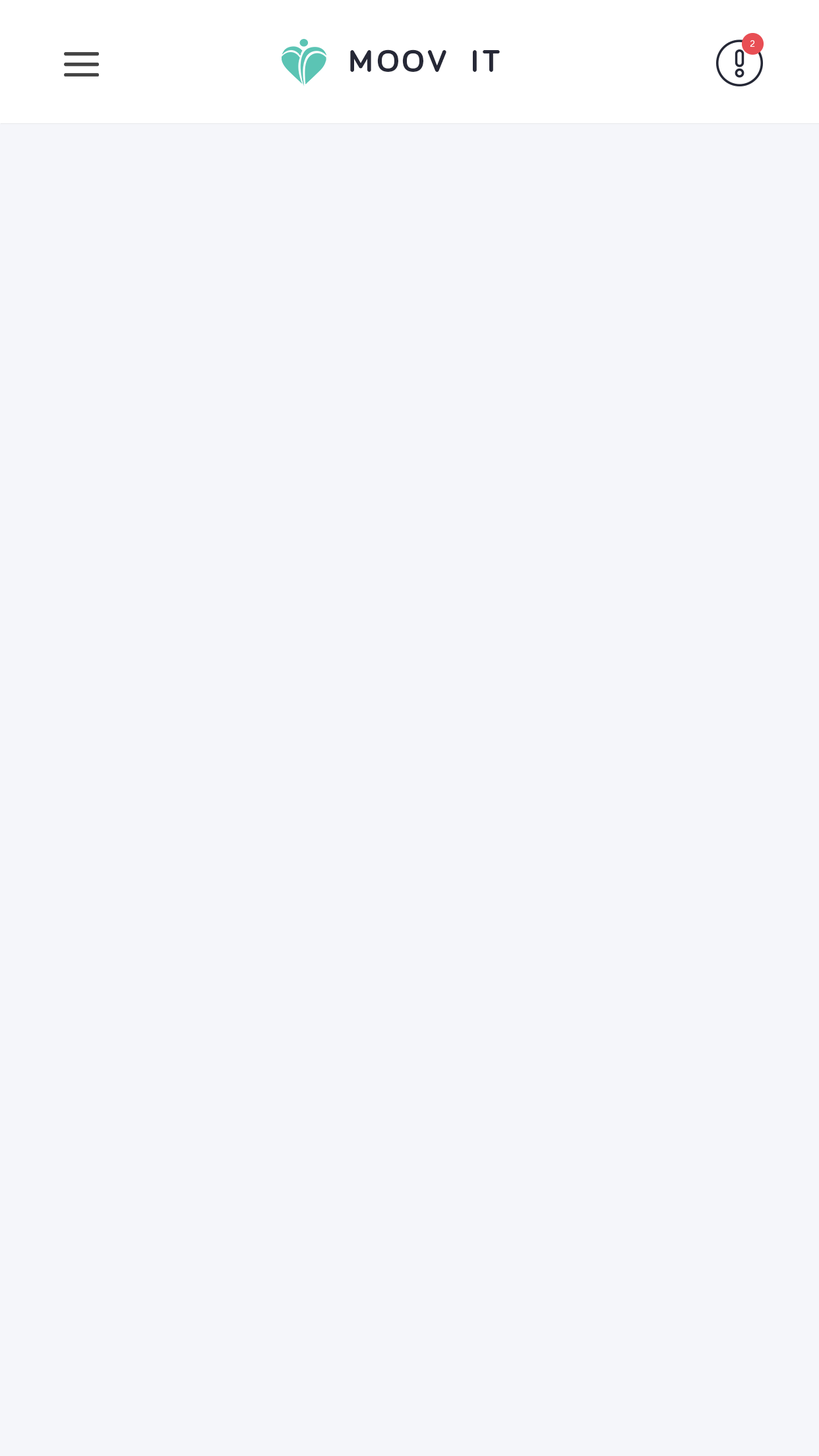
<style>
.page{position:relative;width:819px;height:1456px;background:#f5f6fa}
.page>*{position:absolute;margin:0}
.t1{font:31.9px "Bariol-Bold";letter-spacing:0.1em;color:#262836}
</style>
<div class="page">
<p class="t1" style="left:350px;top:49px;width:150px;height:23px">MOOV  IT</p>
</div>
